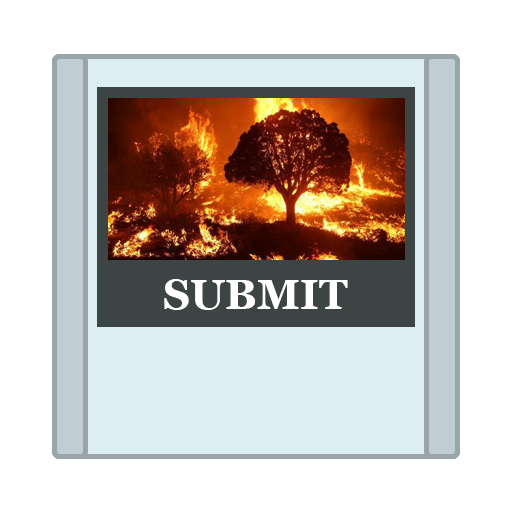
<style>
.page{position:relative;width:512px;height:512px;background:#ffffff}
.page>*{position:absolute;margin:0}
.t1{font:42px "Georgia-Bold";color:#ffffff}
</style>
<div class="page">
<p class="t1" style="left:164px;top:279px;width:184px;height:31px">SUBMIT</p>
</div>
